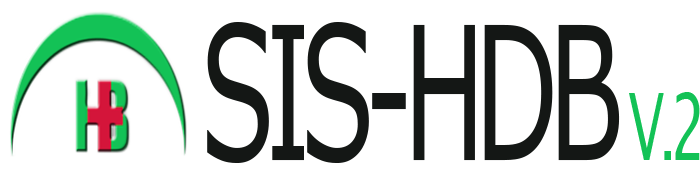
<style>
.page{position:relative;width:700px;height:190px;background:#ffffff}
.page>*{position:absolute;margin:0}
.t1{font:185.1px "Verdana";letter-spacing:-0.1em;color:#141715;scale:0.59 1}
.t2{font:92.6px "LucidaSans";letter-spacing:-0.1em;color:#13c256;scale:0.59 1}
</style>
<div class="page">
<p class="t1" style="left:207px;top:21px;width:493px;height:142px">SIS-HDB <span class="t2">V.2</span></p>
</div>
